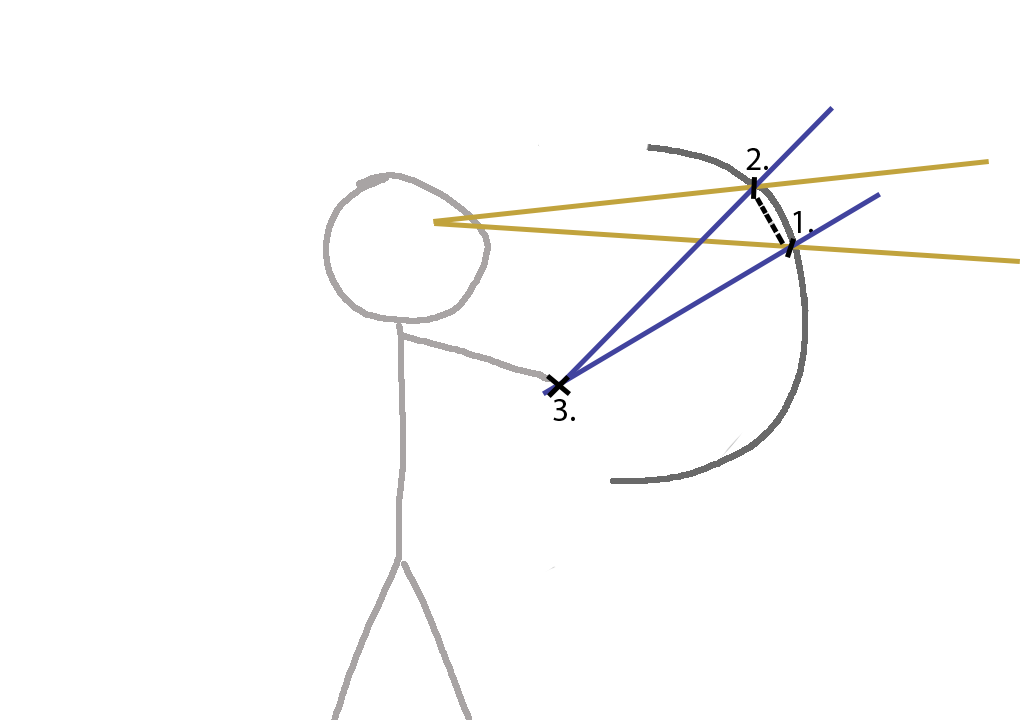
<style>
.page{position:relative;width:1036px;height:720px;background:#ffffff}
.page>*{position:absolute;margin:0}
.t1{font:33.3px "MyriadPro-Regular";color:#000000}
</style>
<div class="page">
<p class="t1" style="left:746px;top:148px;width:22px;height:22px">2.</p>
<p class="t1" style="left:793px;top:211px;width:20px;height:22px">1.</p>
<p class="t1" style="left:553px;top:399px;width:22px;height:22px">3.</p>
</div>
